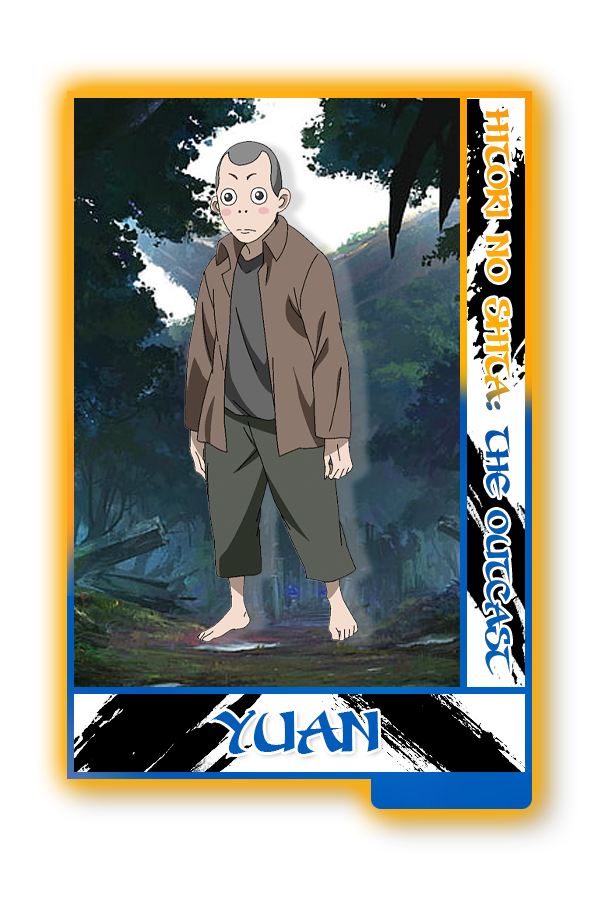
<style>
.page{position:relative;width:600px;height:900px;background:#ffffff}
.page>*{position:absolute;margin:0}
.t1{font:36.7px "SevenSwordsmenBB"}
.t2{font:64.5px "SevenSwordsmenBB";color:#005bb9}
</style>
<div class="page">
<p class="t1" style="left:483px;top:108px;width:28px;height:567px;rotate:90deg">HITORI NO SHITA: THE OUTCAST</p>
<p class="t2" style="left:210px;top:710px;width:169px;height:44px">Yuan</p>
</div>
